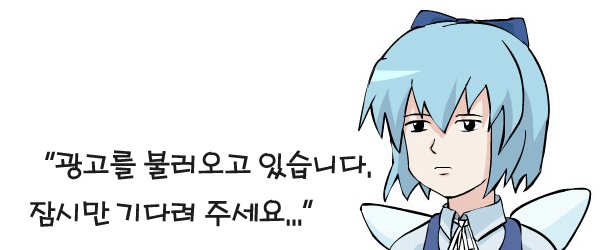
<style>
.page{position:relative;width:600px;height:250px;background:#ffffff}
.page>*{position:absolute;margin:0}
.t1{font:30px/48px "HYporM";letter-spacing:-0.1em;color:#1c1c1c}
</style>
<div class="page">
<p class="t1" style="left:30px;top:150px;width:341px;height:77px">“광고를 불러오고 있습니다.<br>잠시만 기다려 주세요...”</p>
</div>
